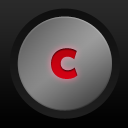
<style>
.page{position:relative;width:128px;height:128px}
.page>*{position:absolute;margin:0}
.t1{font:43.1px "Gibson-Bold";color:#bf0210}
</style>
<div class="page">
<p class="t1" style="left:51px;top:48px;width:27px;height:31px">C</p>
</div>
